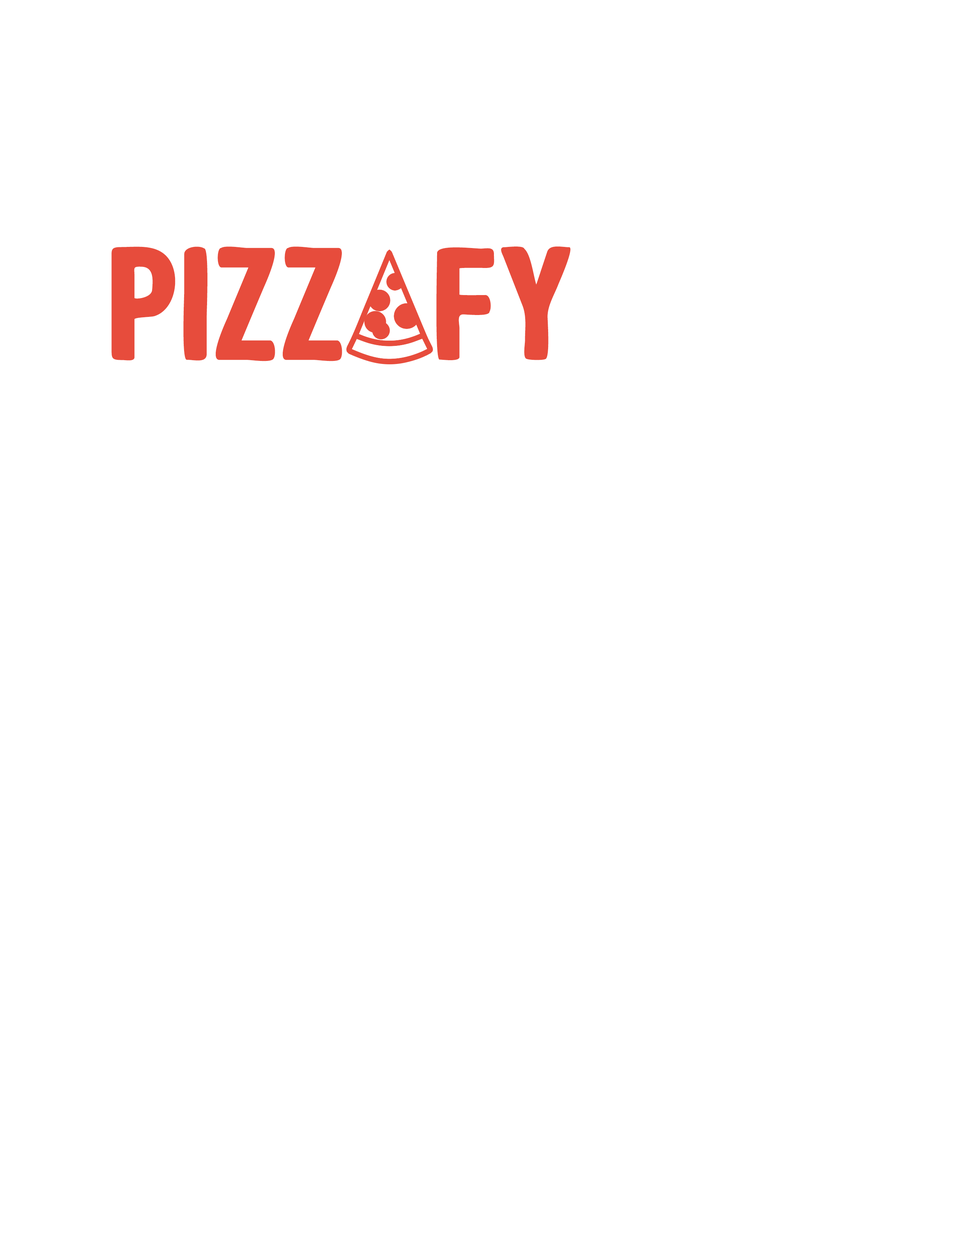
<style>
.page{position:relative;width:960px;height:1242px;background:#ffffff}
.page>*{position:absolute;margin:0}
.t1{font:154.3px "Bushcraft-one";color:#e74c3c;text-transform:uppercase}
.t2{font:154.3px "Bushcraft-one";letter-spacing:0.02em;color:#e74c3c;text-transform:uppercase}
</style>
<div class="page">
<p class="t1" style="left:111px;top:247px;width:460px;height:114px">Pizz<span class="t2">a</span>fy</p>
</div>
